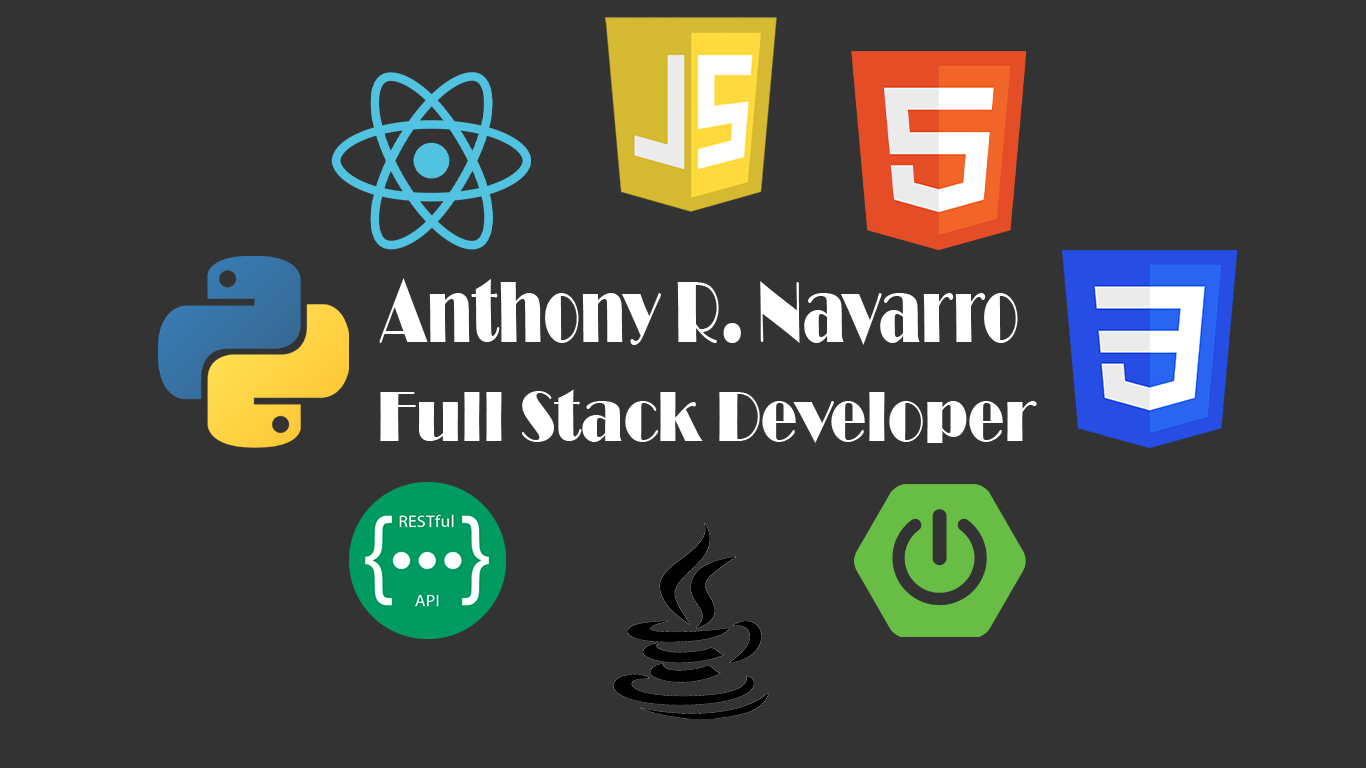
<style>
.page{position:relative;width:1366px;height:768px;background:#333333}
.page>*{position:absolute;margin:0}
.t1{font:90.3px "Broadway";color:#ffffff;scale:0.66 1}
.t2{font:73.8px "Broadway";color:#ffffff;scale:0.81 1}
</style>
<div class="page">
<p class="t1" style="left:379px;top:278px;width:639px;height:67px">Anthony R. Navarro</p>
<p class="t2" style="left:380px;top:389px;width:657px;height:54px">Full Stack Developer</p>
</div>
